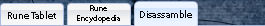
<style>
.page{position:relative;width:265px;height:26px}
.page>*{position:absolute;margin:0}
.t1{font:8px "MyriadPro-Regular";color:#000000}
.t2{font:10px "MyriadPro-Regular";color:#000000}
</style>
<div class="page">
<p class="t1" style="left:77px;top:5px;width:43px;height:18px;text-align:center">Rune<br>Encyclopedia</p>
<p class="t2" style="left:8px;top:11px;width:48px;height:8px">Rune Tablet</p>
<p class="t2" style="left:140px;top:10px;width:52px;height:8px">Disassamble</p>
</div>
